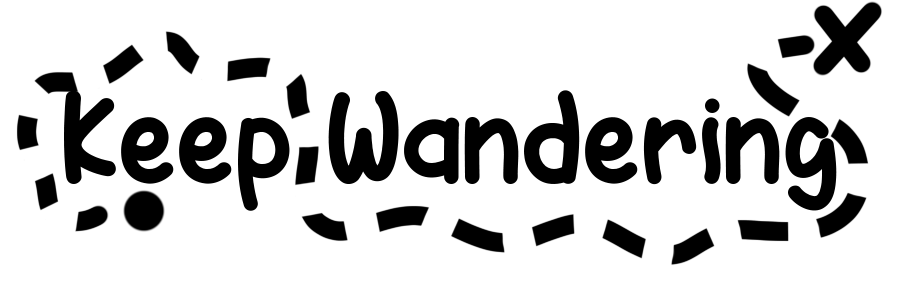
<style>
.page{position:relative;width:900px;height:300px;background:#ffffff}
.page>*{position:absolute;margin:0}
.t1{font:133.3px "Melon-Honey";color:#000000}
</style>
<div class="page">
<p class="t1" style="left:64px;top:90px;width:773px;height:121px">Keep Wandering</p>
</div>
